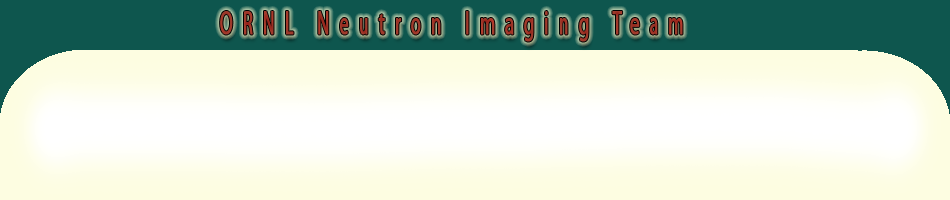
<style>
.page{position:relative;width:950px;height:200px}
.page>*{position:absolute;margin:0}
.t1{font:33.1px "MyriadPro-Regular";letter-spacing:0.54em;color:#a03b2c;font-weight:bold;scale:0.54 1}
</style>
<div class="page">
<p class="t1" style="left:220px;top:11px;width:463px;height:31px">ORNL Neutron Imaging Team</p>
</div>
